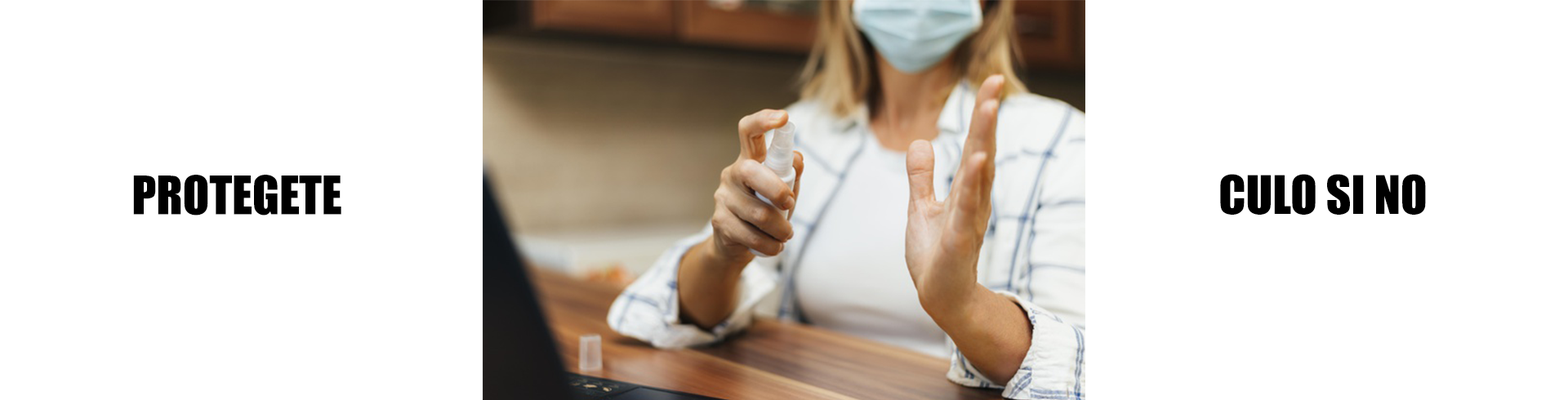
<style>
.page{position:relative;width:1568px;height:400px;background:#ffffff}
.page>*{position:absolute;margin:0}
.t1{font:49px "Impact";color:#000000}
</style>
<div class="page">
<p class="t1" style="left:1220px;top:174px;width:206px;height:41px">CULO SI NO</p>
<p class="t1" style="left:133px;top:175px;width:208px;height:41px">PROTEGETE</p>
</div>
